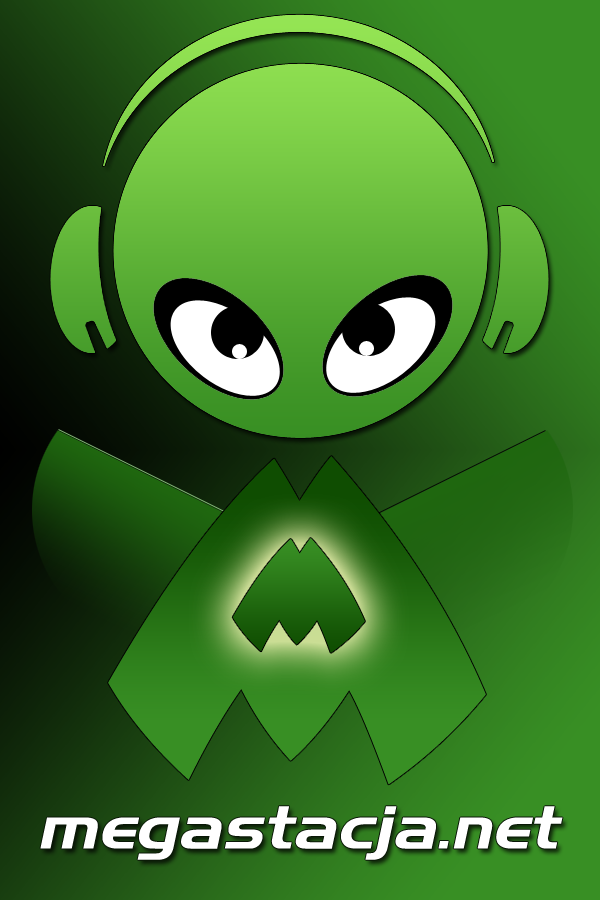
<style>
.page{position:relative;width:600px;height:900px}
.page>*{position:absolute;margin:0}
.t1{font:400.7px "BeeskneesITC"}
.t2{font:140px "BeeskneesITC";color:#216a10}
.t3{font:60px "HanzelWideItalic";color:#ffffff}
</style>
<div class="page">
<p class="t1" style="left:108px;top:456px;width:378px;height:329px">M</p>
<p class="t2" style="left:232px;top:538px;width:133px;height:115px">M</p>
<p class="t3" style="left:40px;top:806px;width:523px;height:54px">megastacja.net</p>
</div>
